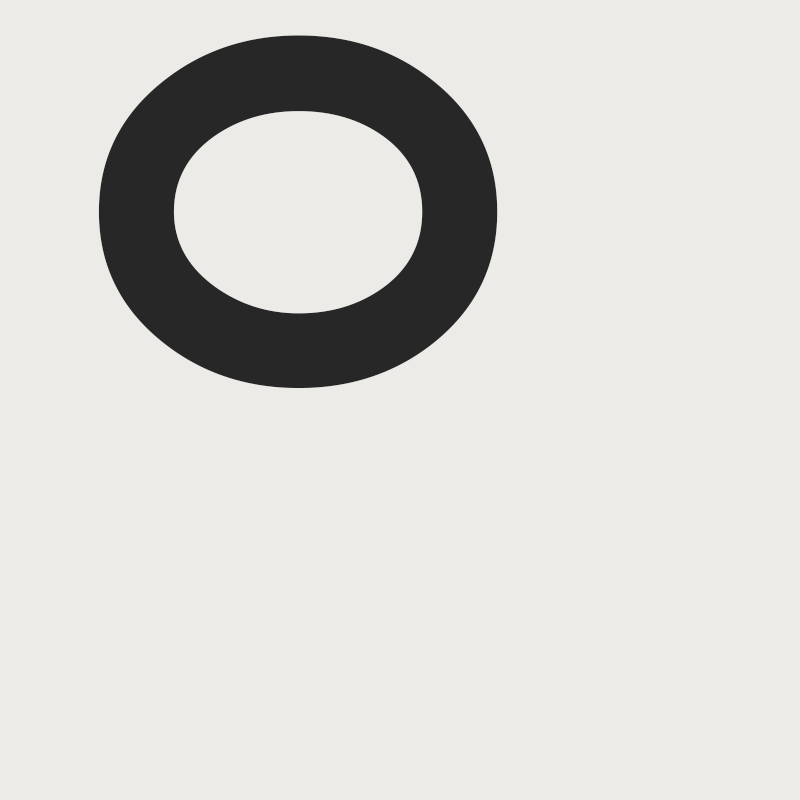
<style>
.page{position:relative;width:800px;height:800px;background:#edebe7}
.page>*{position:absolute;margin:0}
.t1{font:650.6px "BerlinSansFB-Reg";color:#272727}
</style>
<div class="page">
<p class="t1" style="left:98px;top:35px;width:400px;height:354px;rotate:90deg">0</p>
</div>
